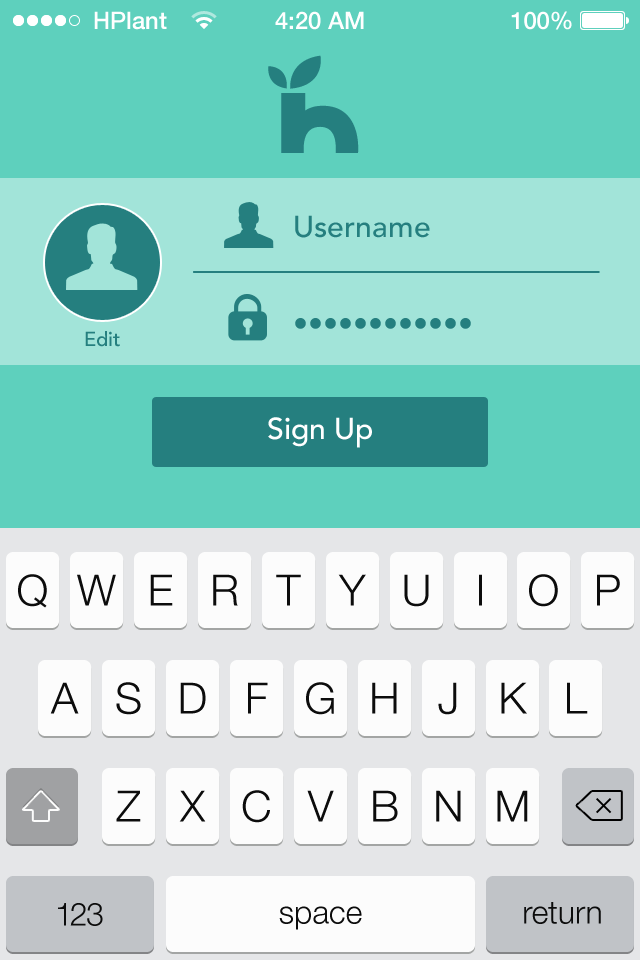
<style>
.page{position:relative;width:640px;height:960px;background:#5ed0bd}
.page>*{position:absolute;margin:0}
.t1{font:24px "HelveticaNeue-Medium";color:#ffffff}
.t2{font:30px "AvenirLT-Medium";color:#257f7f}
.t3{font:20px "AvenirLT-Medium";color:#257f7f}
.t4{font:30px "AvenirLT-Medium";color:#ffffff}
.t5{font:43px "HelveticaNeue-Light";letter-spacing:-0.04em;color:#0c0c0c}
.t6{font:32px "HelveticaNeue-Light";letter-spacing:-0.04em;color:#0c0c0c}
.t7{font:32px "HelveticaNeue-Light";letter-spacing:-0.1em;color:#0c0c0c}
.t8{font:32px "HelveticaNeue-Light";color:#0c0c0c}
</style>
<div class="page">
<p class="t1" style="left:94px;top:11px;width:73px;height:19px">HPlant</p>
<p class="t1" style="left:275px;top:11px;width:89px;height:19px">4:20 AM</p>
<p class="t1" style="left:511px;top:11px;width:61px;height:19px">100%</p>
<p class="t2" style="left:295px;top:215px;width:135px;height:23px">Username</p>
<p class="t2" style="left:295px;top:318px;width:176px;height:11px">••••••••••••</p>
<p class="t3" style="left:85px;top:331px;width:35px;height:16px">Edit</p>
<p class="t4" style="left:268px;top:417px;width:104px;height:31px">Sign Up</p>
<p class="t5" style="left:18px;top:574px;width:29px;height:34px">Q</p>
<p class="t5" style="left:77px;top:574px;width:39px;height:32px">W</p>
<p class="t5" style="left:150px;top:574px;width:23px;height:32px">E</p>
<p class="t5" style="left:213px;top:574px;width:25px;height:32px">R</p>
<p class="t5" style="left:276px;top:574px;width:25px;height:32px">T</p>
<p class="t5" style="left:338px;top:574px;width:28px;height:32px">Y</p>
<p class="t5" style="left:404px;top:574px;width:25px;height:33px">U</p>
<p class="t5" style="left:479px;top:574px;width:3px;height:32px">I</p>
<p class="t5" style="left:529px;top:574px;width:29px;height:33px">O</p>
<p class="t5" style="left:597px;top:574px;width:23px;height:32px">P</p>
<p class="t5" style="left:50px;top:682px;width:29px;height:32px">A</p>
<p class="t5" style="left:116px;top:682px;width:25px;height:33px">S</p>
<p class="t5" style="left:180px;top:682px;width:26px;height:32px">D</p>
<p class="t5" style="left:248px;top:682px;width:20px;height:32px">F</p>
<p class="t5" style="left:306px;top:682px;width:28px;height:33px">G</p>
<p class="t5" style="left:372px;top:682px;width:25px;height:32px">H</p>
<p class="t5" style="left:438px;top:682px;width:19px;height:33px">J</p>
<p class="t5" style="left:501px;top:682px;width:26px;height:32px">K</p>
<p class="t5" style="left:567px;top:682px;width:21px;height:32px">L</p>
<p class="t5" style="left:116px;top:790px;width:25px;height:32px">Z</p>
<p class="t5" style="left:179px;top:790px;width:27px;height:32px">X</p>
<p class="t5" style="left:242px;top:790px;width:28px;height:33px">C</p>
<p class="t5" style="left:307px;top:790px;width:27px;height:32px">V</p>
<p class="t5" style="left:373px;top:790px;width:25px;height:32px">B</p>
<p class="t5" style="left:436px;top:790px;width:25px;height:32px">N</p>
<p class="t5" style="left:497px;top:790px;width:31px;height:32px">M</p>
<p class="t6" style="left:58px;top:903px;width:45px;height:23px"><span class="t7">1</span>23</p>
<p class="t8" style="left:524px;top:902px;width:77px;height:22px">return</p>
<p class="t8" style="left:279px;top:906px;width:83px;height:24px">space</p>
</div>
